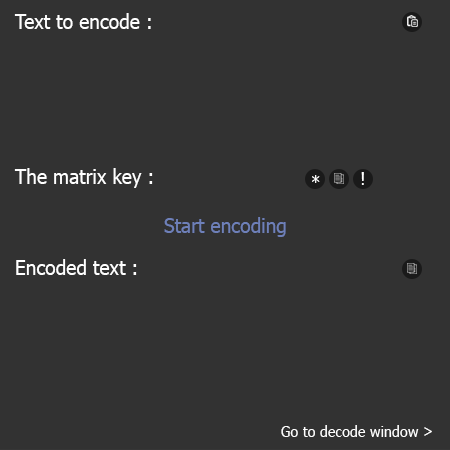
<style>
.page{position:relative;width:450px;height:450px;background:#323232}
.page>*{position:absolute;margin:0}
.t1{font:20px "Tahoma";color:#ffffff;scale:0.96 1}
.t2{font:18px "Tahoma";color:#ffffff;scale:0.96 1}
.t3{font:20px "Tahoma";color:#6e80b9;scale:0.96 1}
.t4{font:15px "Tahoma";color:#ffffff;scale:0.96 1}
</style>
<div class="page">
<p class="t1" style="left:14px;top:13px;width:137px;height:16px">Text to encode :</p>
<p class="t1" style="left:14px;top:168px;width:139px;height:20px">The matrix key :</p>
<p class="t2" style="left:361px;top:172px;width:3px;height:13px">!</p>
<p class="t2" style="left:312px;top:175px;width:8px;height:8px">*</p>
<p class="t3" style="left:164px;top:217px;width:122px;height:20px">Start encoding</p>
<p class="t1" style="left:16px;top:259px;width:121px;height:16px">Encoded text :</p>
<p class="t4" style="left:281px;top:425px;width:151px;height:12px">Go to decode window &gt;</p>
</div>
